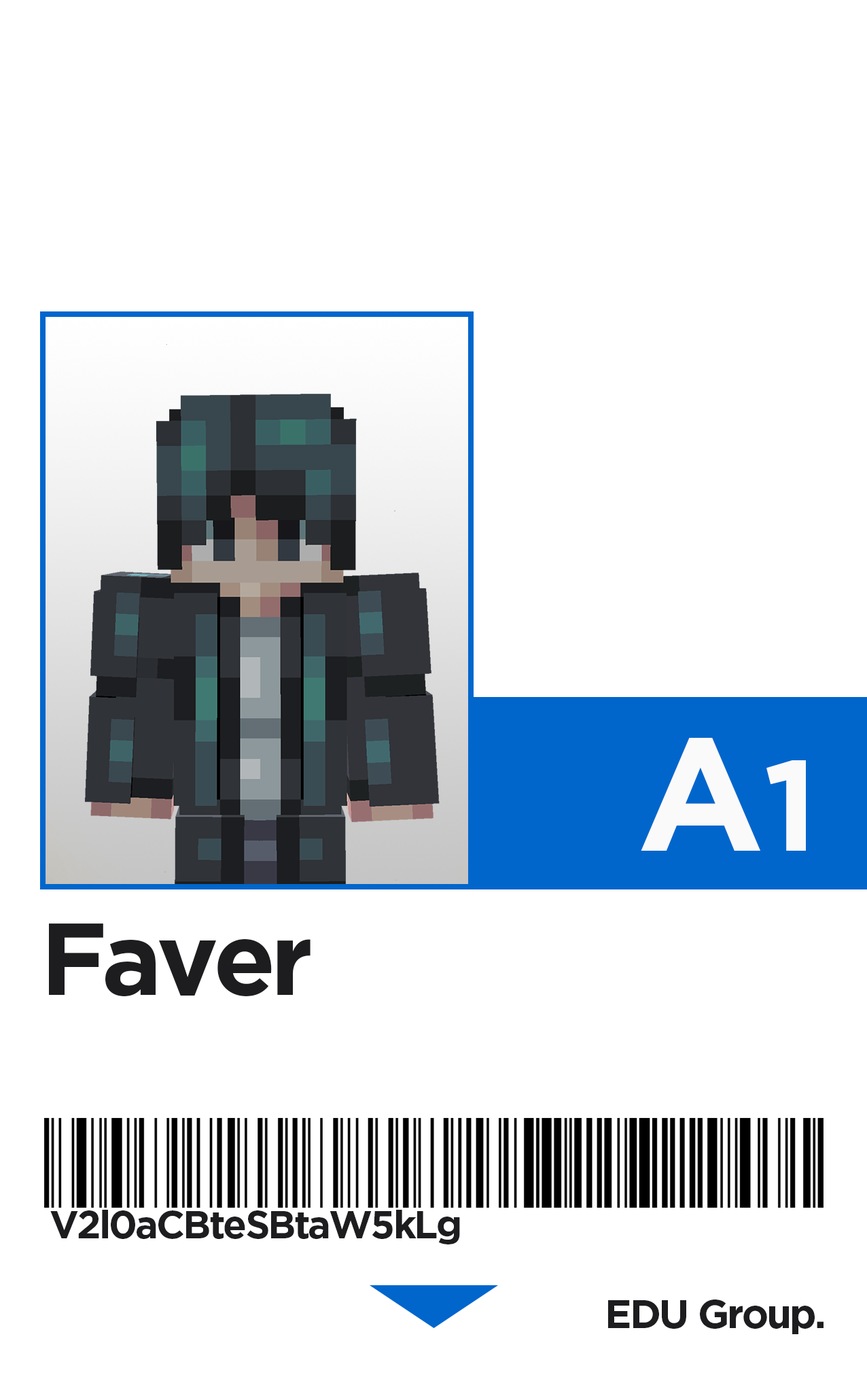
<style>
.page{position:relative;width:867px;height:1375px;background:#ffffff}
.page>*{position:absolute;margin:0}
.t1{font:160.6px "Gotham-Bold";color:#fafafa}
.t2{font:128.5px "Gotham-Bold";color:#fafafa}
.t3{font:102px "Gotham-Bold";letter-spacing:-0.05em;color:#1d1d1f}
.t4{font:38.8px "Gotham-Bold";letter-spacing:-0.05em;color:#1d1d1f}
.t5{font:40.1px "Gotham-Bold";letter-spacing:-0.05em;color:#1d1d1f}
</style>
<div class="page">
<p class="t1" style="left:641px;top:738px;width:165px;height:112px">A<span class="t2">1</span></p>
<p class="t3" style="left:49px;top:923px;width:262px;height:73px">Faver</p>
<p class="t4" style="left:50px;top:1209px;width:410px;height:35px">V2l0aCBteSBtaW5kLg</p>
<p class="t5" style="left:608px;top:1299px;width:216px;height:35px">EDU Group.</p>
</div>
